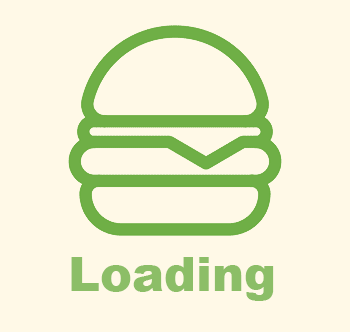
<style>
.page{position:relative;width:350px;height:332px;background:#fff9e7}
.page>*{position:absolute;margin:0}
.t1{font:48px "Arial-Black";color:#8cbe67}
</style>
<div class="page">
<p class="t1" style="left:71px;top:257px;width:203px;height:44px">Loading</p>
</div>
